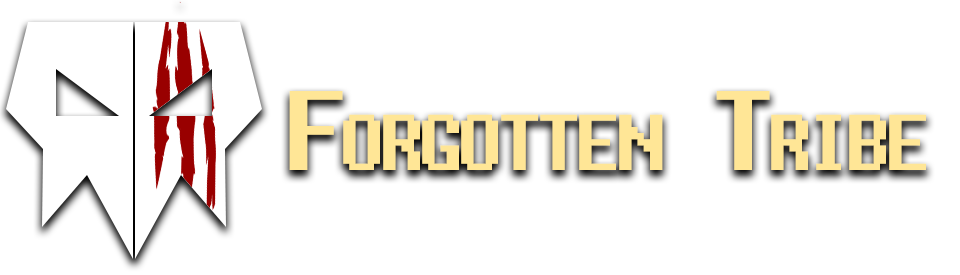
<style>
.page{position:relative;width:960px;height:275px;background:#ffffff}
.page>*{position:absolute;margin:0}
.t1{font:112.5px "Fixedsys";letter-spacing:-0.125em;color:#ffe696;font-variant:small-caps}
</style>
<div class="page">
<p class="t1" style="left:289px;top:91px;width:637px;height:79px">Forgotten Tribe</p>
</div>
